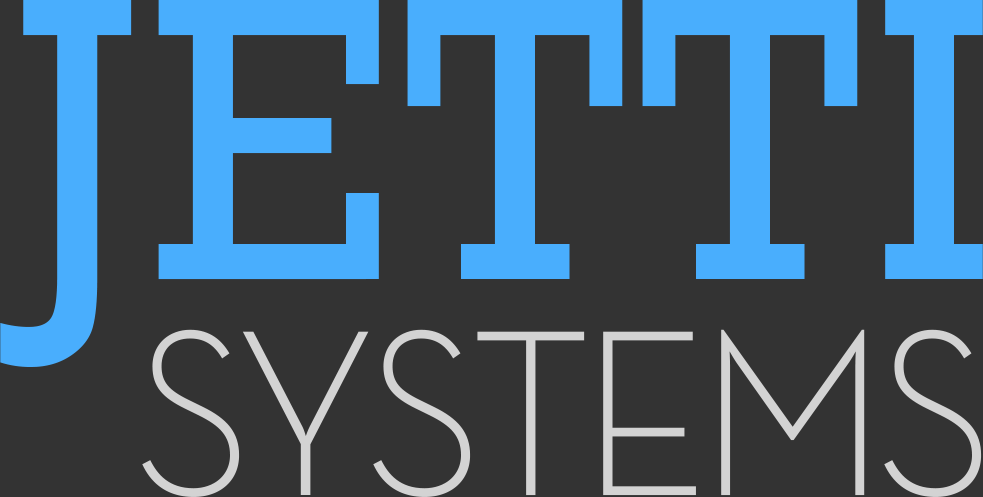
<style>
.page{position:relative;width:983px;height:497px;background:#333333}
.page>*{position:absolute;margin:0}
.t1{font:411.2px "Rockwell";letter-spacing:0.03em;color:#49aefd;scale:0.95 1}
.t2{font:240.1px "NeutrafaceText-Light";letter-spacing:-0.05em;color:#d3d3d3;scale:0.94 1}
</style>
<div class="page">
<p class="t1" style="left:0px;top:0px;width:983px;height:367px">JETTI</p>
<p class="t2" style="left:142px;top:329px;width:840px;height:168px">SYSTEMS</p>
</div>
